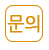
<style>
.page{position:relative;width:49px;height:50px;background:#ffffff}
.page>*{position:absolute;margin:0}
.t1{font:18px "NanumGothic";letter-spacing:-0.02em;color:#d98e04;font-weight:bold}
</style>
<div class="page">
<p class="t1" style="left:7px;top:15px;width:33px;height:18px">문의</p>
</div>
